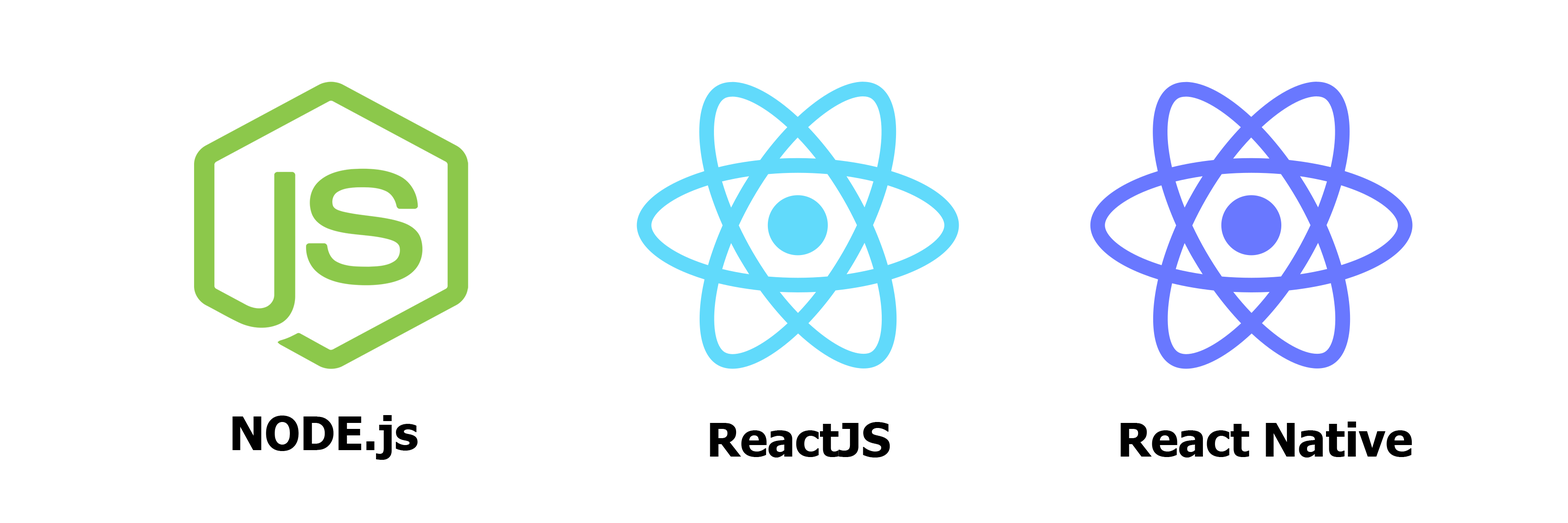
<style>
.page{position:relative;width:1568px;height:523px;background:#ffffff}
.page>*{position:absolute;margin:0}
.t1{font:46.1px "Tahoma-Bold";color:#000000}
</style>
<div class="page">
<p class="t1" style="left:232px;top:415px;width:186px;height:45px">NODE.js</p>
<p class="t1" style="left:710px;top:422px;width:180px;height:35px">ReactJS</p>
<p class="t1" style="left:1120px;top:421px;width:292px;height:36px">React Native</p>
</div>
